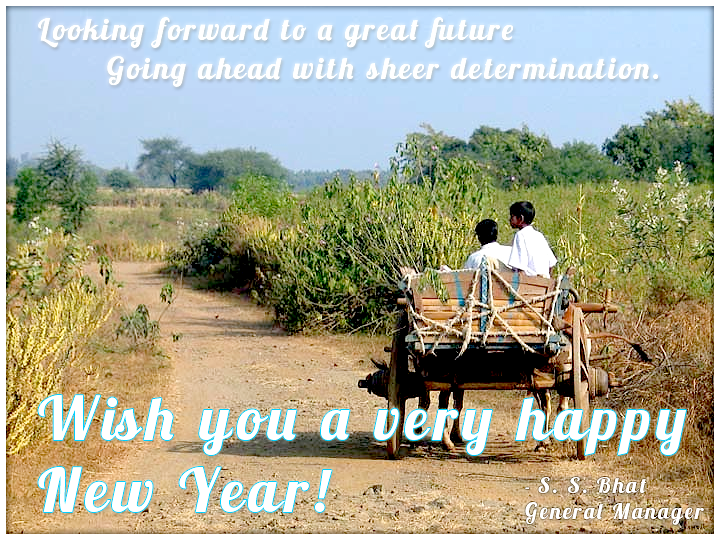
<style>
.page{position:relative;width:720px;height:540px}
.page>*{position:absolute;margin:0}
.t1{font:30px "Lobster1.3";letter-spacing:0.1em;color:#ffffff}
.t2{font:60px "Lobster1.3";letter-spacing:0.1em;color:#ffffff}
.t3{font:22px "Lobster1.3";letter-spacing:0.1em;color:#ffffff}
.t4{font:18px "Lobster1.3";letter-spacing:0.1em;color:#ffffff}
</style>
<div class="page">
<p class="t1" style="left:38px;top:17px;width:475px;height:31px">Looking forward to a great future</p>
<p class="t1" style="left:107px;top:56px;width:551px;height:31px">Going ahead with sheer determination.</p>
<p class="t2" style="left:38px;top:395px;width:648px;height:117px">Wish you a very happy<br>New Year!</p>
<p class="t3" style="left:525px;top:477px;width:179px;height:48px"><span class="t4">- </span>S. S. Bhat<br>General Manager</p>
</div>
